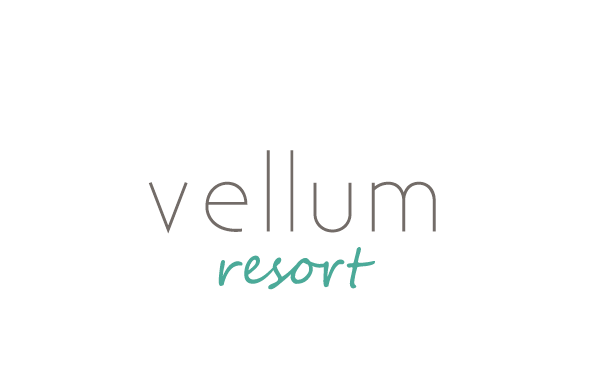
<style>
.page{position:relative;width:590px;height:390px;background:#ffffff}
.page>*{position:absolute;margin:0}
.t1{font:90.9px "Existence-Light";letter-spacing:0.1em;color:#736c68}
.t2{font:52.5px "SegoeScript";color:#4baa99}
</style>
<div class="page">
<p class="t1" style="left:148px;top:150px;width:288px;height:84px">vellum</p>
<p class="t2" style="left:218px;top:247px;width:157px;height:43px">resort</p>
</div>
